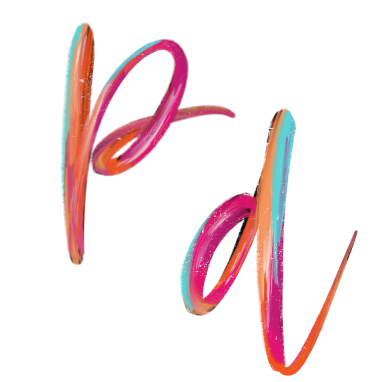
<style>
.page{position:relative;width:378px;height:382px;background:#ffffff}
.page>*{position:absolute;margin:0}
.t1{font:383.3px "RosettaColor"}
</style>
<div class="page">
<p class="t1" style="left:59px;top:21px;width:178px;height:245px">p</p>
<p class="t1" style="left:179px;top:107px;width:179px;height:269px">d</p>
</div>
